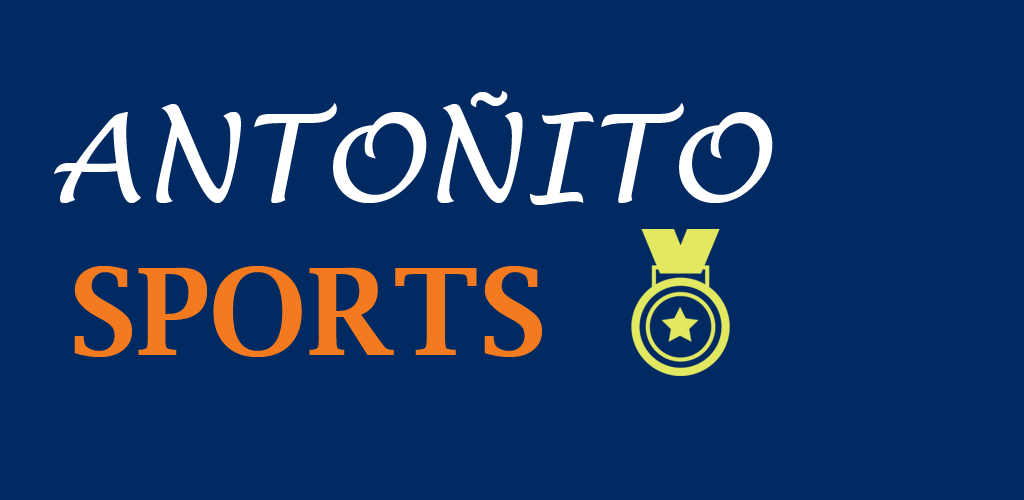
<style>
.page{position:relative;width:1024px;height:500px;background:#012a62}
.page>*{position:absolute;margin:0}
.t1{font:120px "LucidaHandwriting-Italic";color:#ffffff}
.t2{font:120px "LucidaBright-Demi";color:#f47a20}
</style>
<div class="page">
<p class="t1" style="left:54px;top:91px;width:719px;height:114px">ANTOÑITO</p>
<p class="t2" style="left:74px;top:266px;width:468px;height:91px">SPORTS</p>
</div>
